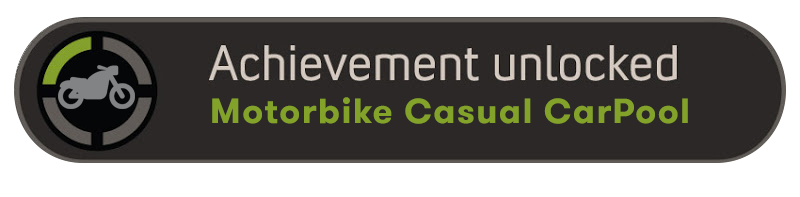
<style>
.page{position:relative;width:800px;height:197px;background:#2c2827}
.page>*{position:absolute;margin:0}
.t1{font:35.1px "GTWalsheimBold";letter-spacing:0.04em;color:#83a22a}
</style>
<div class="page">
<p class="t1" style="left:212px;top:97px;width:476px;height:27px">Motorbike Casual CarPool</p>
</div>
